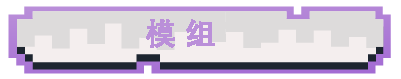
<style>
.page{position:relative;width:401px;height:79px;background:#dddbdb}
.page>*{position:absolute;margin:0}
.t1{font:30px "DengXian-Bold";color:#ba8fd9;font-weight:bold}
</style>
<div class="page">
<p class="t1" style="left:146px;top:19px;width:69px;height:29px">模 组</p>
</div>
